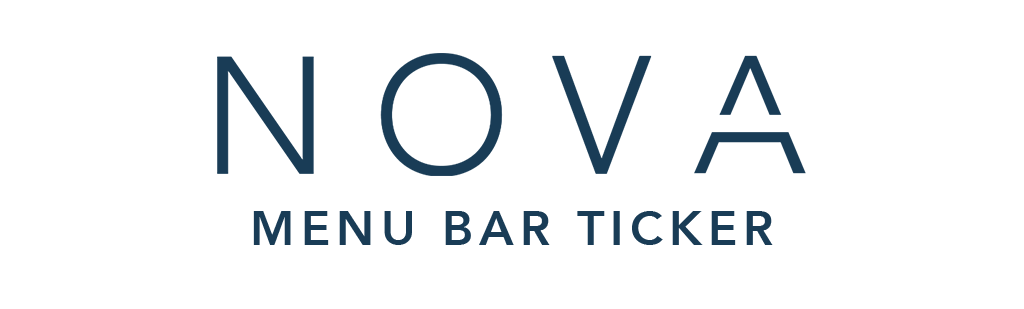
<style>
.page{position:relative;width:1024px;height:309px;background:#ffffff}
.page>*{position:absolute;margin:0}
.t1{font:48px "Avenir-Heavy";letter-spacing:0.128em;color:#193c56}
</style>
<div class="page">
<p class="t1" style="left:253px;top:211px;width:520px;height:34px">MENU BAR TICKER</p>
</div>
